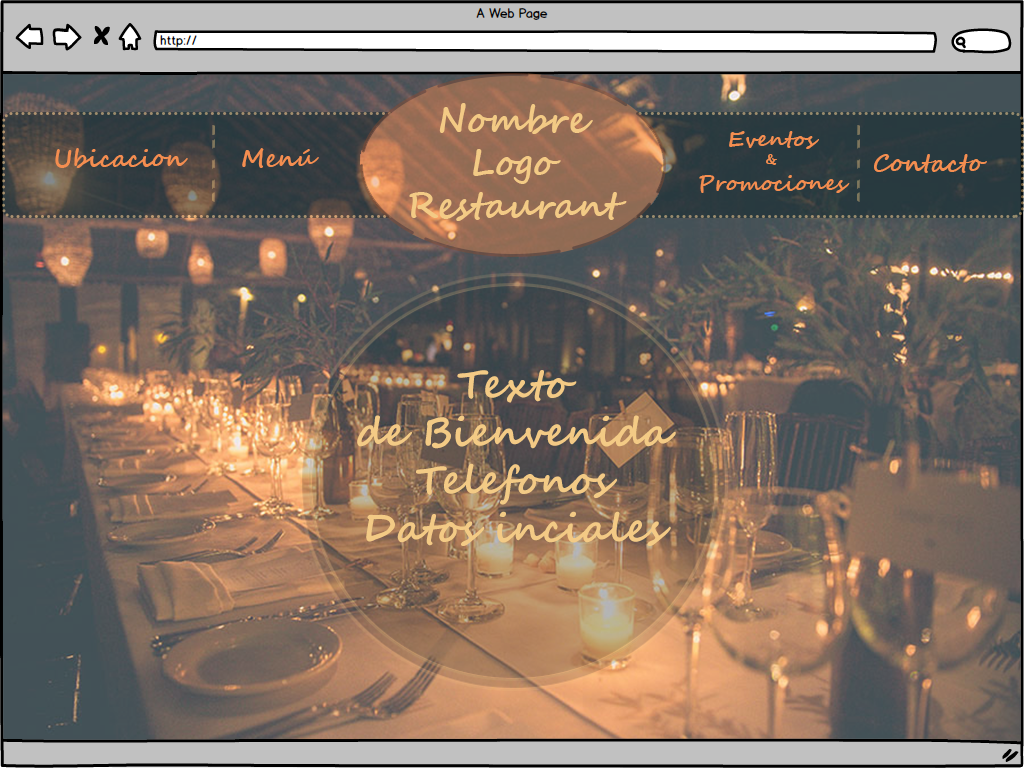
<style>
.page{position:relative;width:1024px;height:768px}
.page>*{position:absolute;margin:0}
.t1{font:36px "SegoeScript-Bold";color:#f3ca85}
.t2{font:22px "SegoeScript-Bold";color:#f48e50}
.t3{font:14px "SegoeScript-Bold";color:#f48e50}
.t4{font:24px "SegoeScript-Bold";color:#f48e50}
.t5{font:40px "SegoeScript-Bold";color:#f3ca85}
</style>
<div class="page">
<p class="t1" style="left:409px;top:103px;width:218px;height:118px;text-align:center">Nombre <br>Logo<br>Restaurant</p>
<p class="t2" style="left:699px;top:131px;width:151px;height:62px;text-align:center">Eventos <br><span class="t3">&amp;<br></span>Promociones</p>
<p class="t4" style="left:55px;top:148px;width:133px;height:20px">Ubicacion</p>
<p class="t4" style="left:242px;top:148px;width:77px;height:20px">Menú</p>
<p class="t4" style="left:874px;top:154px;width:113px;height:19px">Contacto</p>
<p class="t5" style="left:357px;top:370px;width:319px;height:176px;text-align:center">Texto<br>de Bienvenida<br>Telefonos<br>Datos inciales</p>
</div>
